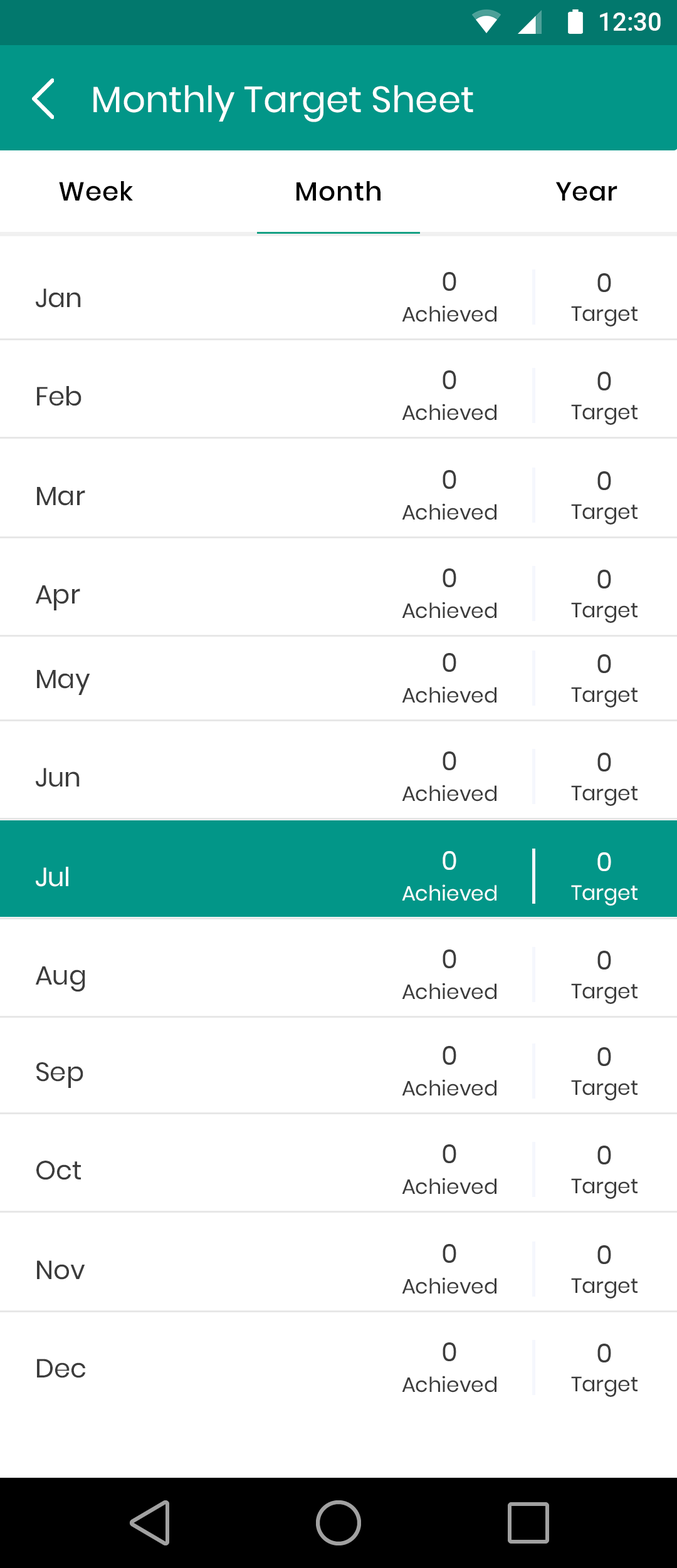
<style>
.page{position:relative;width:677px;height:1568px;background:#ffffff}
.page>*{position:absolute;margin:0}
.t1{font:25.7px "Roboto-Medium";color:#ffffff}
.t2{font:36.3px "Poppins-Regular";color:#ffffff}
.t3{font:26.2px "Poppins-Medium";letter-spacing:0.025em;color:#000000}
.t4{font:26.3px "Poppins-Regular";color:#3c3c3c}
.t5{font:20.7px "Poppins-Regular";color:#3c3c3c}
.t6{font:26.3px "Poppins-Regular";color:#ffffff}
.t7{font:20.7px "Poppins-Regular";color:#ffffff}
</style>
<div class="page">
<p class="t1" style="left:600px;top:13px;width:61px;height:18px">12:30</p>
<p class="t2" style="left:93px;top:85px;width:380px;height:37px">Monthly Target Sheet</p>
<p class="t3" style="left:59px;top:181px;width:74px;height:20px">Week</p>
<p class="t3" style="left:296px;top:181px;width:84px;height:20px">Month</p>
<p class="t3" style="left:555px;top:182px;width:62px;height:19px">Year</p>
<p class="t4" style="left:442px;top:272px;width:14px;height:19px">0</p>
<p class="t4" style="left:597px;top:273px;width:14px;height:19px">0</p>
<p class="t4" style="left:36px;top:288px;width:45px;height:20px">Jan</p>
<p class="t5" style="left:402px;top:305px;width:94px;height:17px">Achieved</p>
<p class="t5" style="left:571px;top:306px;width:66px;height:21px">Target</p>
<p class="t4" style="left:442px;top:370px;width:14px;height:19px">0</p>
<p class="t4" style="left:597px;top:372px;width:14px;height:18px">0</p>
<p class="t4" style="left:37px;top:386px;width:44px;height:20px">Feb</p>
<p class="t5" style="left:402px;top:404px;width:94px;height:17px">Achieved</p>
<p class="t5" style="left:571px;top:404px;width:66px;height:21px">Target</p>
<p class="t4" style="left:442px;top:470px;width:14px;height:19px">0</p>
<p class="t4" style="left:597px;top:471px;width:14px;height:19px">0</p>
<p class="t4" style="left:37px;top:487px;width:48px;height:19px">Mar</p>
<p class="t5" style="left:402px;top:503px;width:94px;height:17px">Achieved</p>
<p class="t5" style="left:571px;top:504px;width:66px;height:21px">Target</p>
<p class="t4" style="left:442px;top:568px;width:14px;height:19px">0</p>
<p class="t4" style="left:597px;top:570px;width:14px;height:18px">0</p>
<p class="t4" style="left:35px;top:585px;width:45px;height:25px">Apr</p>
<p class="t5" style="left:402px;top:602px;width:94px;height:17px">Achieved</p>
<p class="t5" style="left:571px;top:602px;width:66px;height:21px">Target</p>
<p class="t4" style="left:442px;top:653px;width:14px;height:19px">0</p>
<p class="t4" style="left:597px;top:654px;width:14px;height:19px">0</p>
<p class="t4" style="left:37px;top:670px;width:53px;height:25px">May</p>
<p class="t5" style="left:402px;top:686px;width:94px;height:17px">Achieved</p>
<p class="t5" style="left:571px;top:687px;width:66px;height:21px">Target</p>
<p class="t4" style="left:442px;top:751px;width:14px;height:19px">0</p>
<p class="t4" style="left:597px;top:753px;width:14px;height:18px">0</p>
<p class="t4" style="left:36px;top:768px;width:44px;height:19px">Jun</p>
<p class="t5" style="left:402px;top:785px;width:94px;height:17px">Achieved</p>
<p class="t5" style="left:571px;top:785px;width:66px;height:21px">Target</p>
<p class="t6" style="left:442px;top:851px;width:14px;height:19px">0</p>
<p class="t6" style="left:597px;top:852px;width:14px;height:19px">0</p>
<p class="t6" style="left:36px;top:867px;width:32px;height:20px">Jul</p>
<p class="t7" style="left:402px;top:884px;width:94px;height:17px">Achieved</p>
<p class="t7" style="left:571px;top:885px;width:66px;height:21px">Target</p>
<p class="t4" style="left:442px;top:949px;width:14px;height:19px">0</p>
<p class="t4" style="left:597px;top:951px;width:14px;height:19px">0</p>
<p class="t4" style="left:35px;top:966px;width:50px;height:26px">Aug</p>
<p class="t5" style="left:402px;top:983px;width:94px;height:17px">Achieved</p>
<p class="t5" style="left:571px;top:983px;width:66px;height:21px">Target</p>
<p class="t4" style="left:442px;top:1046px;width:14px;height:19px">0</p>
<p class="t4" style="left:597px;top:1047px;width:14px;height:19px">0</p>
<p class="t4" style="left:36px;top:1062px;width:47px;height:26px">Sep</p>
<p class="t5" style="left:402px;top:1079px;width:94px;height:17px">Achieved</p>
<p class="t5" style="left:571px;top:1080px;width:66px;height:20px">Target</p>
<p class="t4" style="left:442px;top:1144px;width:14px;height:19px">0</p>
<p class="t4" style="left:597px;top:1146px;width:14px;height:18px">0</p>
<p class="t4" style="left:36px;top:1161px;width:45px;height:19px">Oct</p>
<p class="t5" style="left:402px;top:1178px;width:94px;height:16px">Achieved</p>
<p class="t5" style="left:571px;top:1178px;width:66px;height:21px">Target</p>
<p class="t4" style="left:442px;top:1244px;width:14px;height:19px">0</p>
<p class="t4" style="left:597px;top:1245px;width:14px;height:19px">0</p>
<p class="t4" style="left:37px;top:1260px;width:48px;height:20px">Nov</p>
<p class="t5" style="left:402px;top:1277px;width:94px;height:17px">Achieved</p>
<p class="t5" style="left:571px;top:1278px;width:66px;height:21px">Target</p>
<p class="t4" style="left:442px;top:1342px;width:14px;height:19px">0</p>
<p class="t4" style="left:597px;top:1344px;width:14px;height:18px">0</p>
<p class="t4" style="left:37px;top:1359px;width:48px;height:19px">Dec</p>
<p class="t5" style="left:402px;top:1376px;width:94px;height:17px">Achieved</p>
<p class="t5" style="left:571px;top:1376px;width:66px;height:21px">Target</p>
</div>
